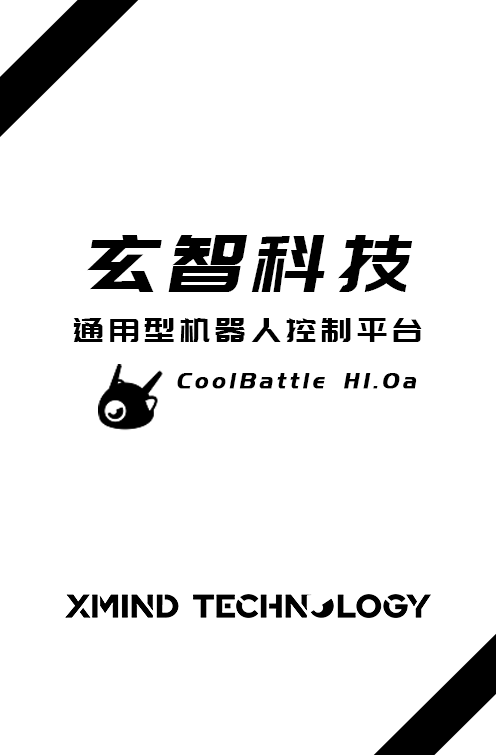
<style>
.page{position:relative;width:496px;height:755px;background:#ffffff}
.page>*{position:absolute;margin:0}
.t1{font:79.2px "PangMenZhengDao";letter-spacing:0.144em;color:#000000;font-style:italic}
.t2{font:33.3px "PangMenZhengDao";letter-spacing:0.144em;color:#000000}
.t3{font:22.9px "PangMenZhengDao";letter-spacing:0.144em;color:#000000;font-weight:bold;font-style:italic}
</style>
<div class="page">
<p class="t1" style="left:87px;top:235px;width:326px;height:57px">玄智科技</p>
<p class="t2" style="left:73px;top:318px;width:349px;height:24px">通用型机器人控制平台</p>
<p class="t3" style="left:177px;top:373px;width:240px;height:16px">CoolBattle H1.0a</p>
</div>
